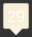
<style>
.page{position:relative;width:32px;height:37px}
.page>*{position:absolute;margin:0}
.t1{font:15px "NewsGothicBT-Roman";color:#ffffff}
</style>
<div class="page">
<p class="t1" style="left:7px;top:11px;width:18px;height:11px">29</p>
</div>
